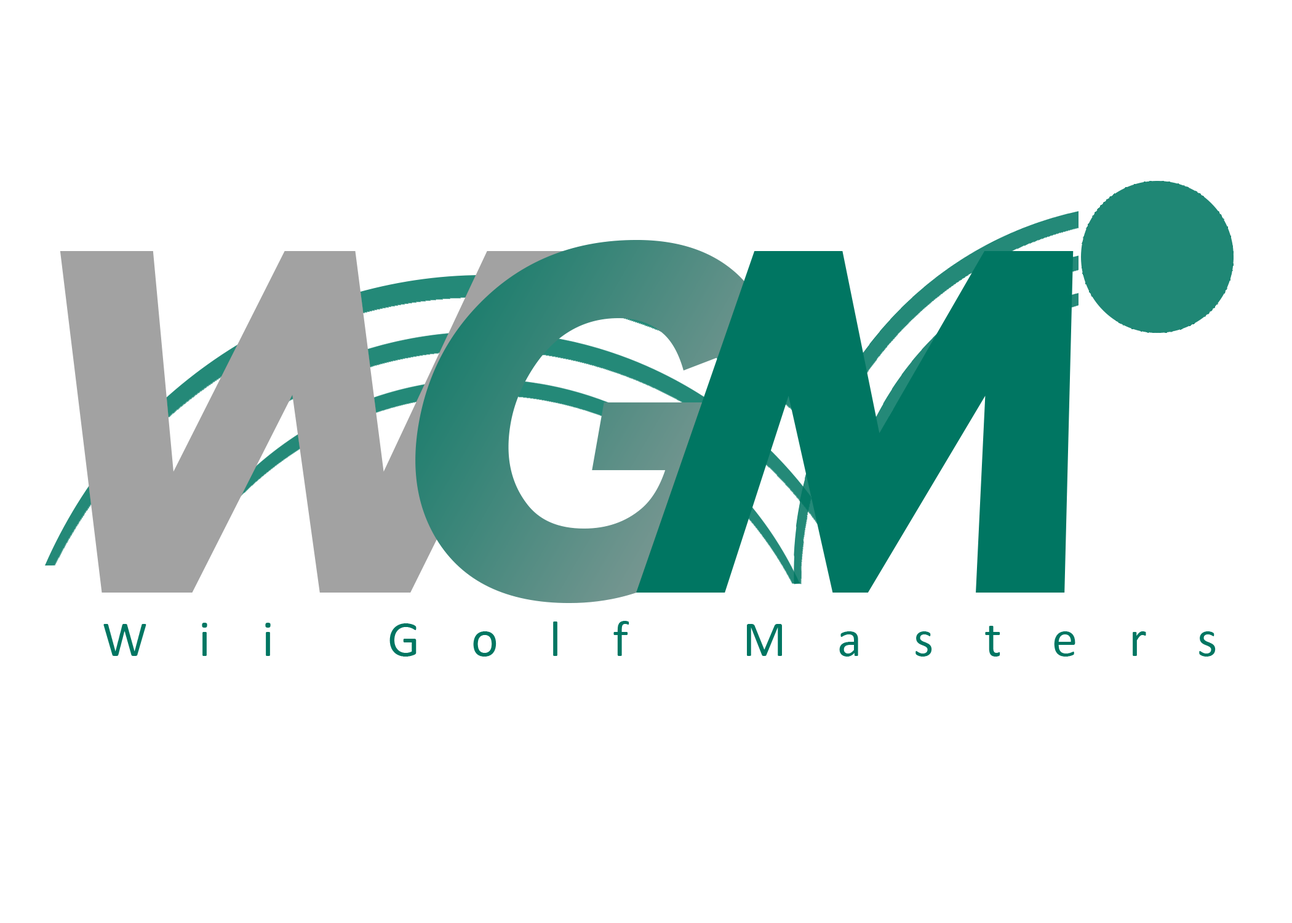
<style>
.page{position:relative;width:1292px;height:923px;background:#ffffff}
.page>*{position:absolute;margin:0}
.t1{font:512.7px "Aharoni-Bold";color:#a2a2a2;font-style:italic}
.t2{font:512.7px "Aharoni-Bold";color:#007662;font-style:italic}
.t3{font:51.3px "Calibri";letter-spacing:1em;color:#007662}
</style>
<div class="page">
<p class="t1" style="left:60px;top:251px;width:520px;height:341px">W</p>
<p class="t2" style="left:636px;top:251px;width:438px;height:341px">M</p>
<p class="t3" style="left:103px;top:621px;width:1113px;height:35px">Wii Golf Masters</p>
</div>
